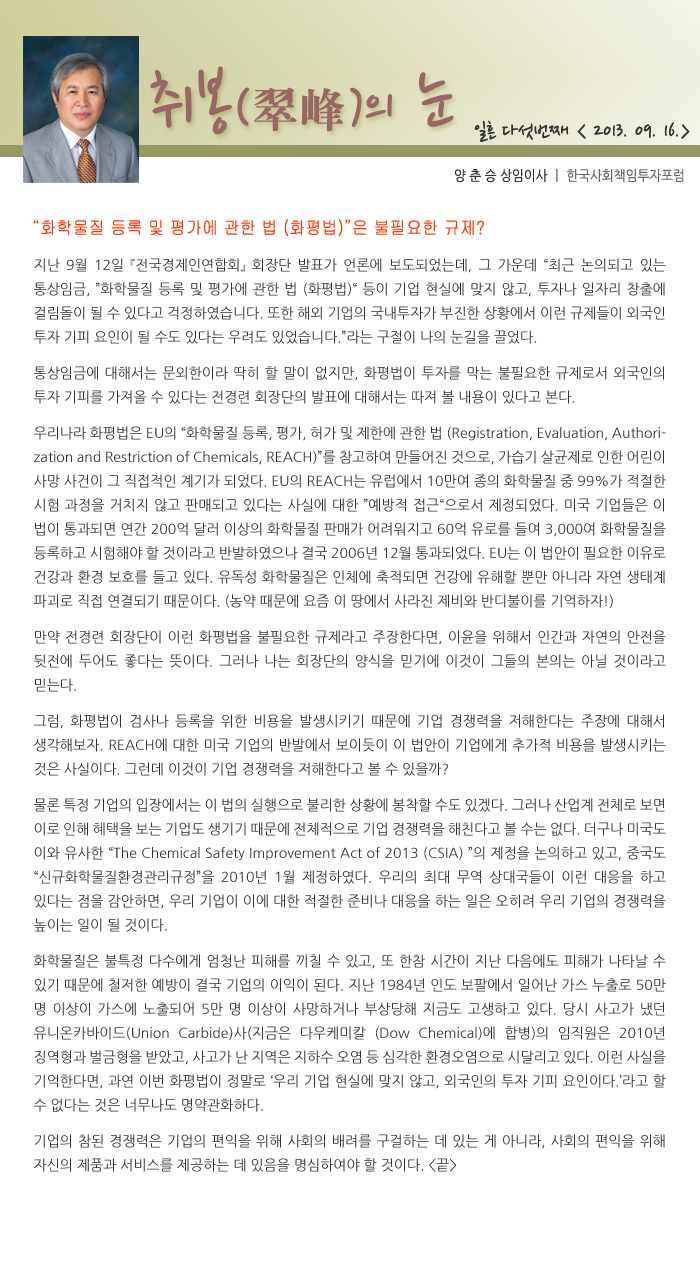
<style>
.page{position:relative;width:700px;height:1276px;background:#ffffff}
.page>*{position:absolute;margin:0}
.t1{font:77.5px "NanumPen";color:#996666}
.t2{font:60px "NanumPen";color:#996666}
.t3{font:48px "H2mjrE";color:#996666}
.t4{font:24px "NanumPen";color:#333333}
.t5{font:14px "NanumGothic";color:#666666;scale:0.9 1}
.t6{font:14px "NanumGothic";color:#333333;scale:0.9 1}
.t7{font:18px "Gulim";color:#ff3300;scale:0.9 1}
.t8{font:14px/24px "NanumGothic";color:#333333}
.t9{font:14px/12px "NanumGothic";color:#333333}
</style>
<div class="page">
<p class="t1" style="left:150px;top:66px;width:304px;height:69px">취봉<span class="t2">(</span><span class="t3">翠峰</span><span class="t2">)</span><span class="t2">의</span> 눈</p>
<p class="t4" style="left:474px;top:120px;width:216px;height:22px">일흔 다섯번째 &lt; 2013. 09. 16.&gt;</p>
<p class="t5" style="left:455px;top:169px;width:229px;height:14px"><span class="t6">양 춘 승 상임이사 </span>ㅣ 한국사회책임투자포럼</p>
<p class="t7" style="left:33px;top:219px;width:451px;height:17px">“화학물질 등록 및 평가에 관한 법 (화평법)”은 불필요한 규제?</p>
<p class="t8" style="left:34px;top:258px;width:632px;height:914px;text-align:justify">지난 9월 12일 『전국경제인연합회』 회장단 발표가 언론에 보도되었는데, 그 가운데 “최근 논의되고 있는 통상임금, ”화학물질 등록 및 평가에 관한 법 (화평법)“ 등이 기업 현실에 맞지 않고, 투자나 일자리 창출에 걸림돌이 될 수 있다고 걱정하였습니다. 또한 해외 기업의 국내투자가 부진한 상황에서 이런 규제들이 외국인 투자 기피 요인이 될 수도 있다는 우려도 있었습니다.”라는 구절이 나의 눈<span class="t9">길을 끌었다. <br><br>통상임금에 대해서는 문외한이라 딱히 할 말이 없지만, 화평법이 투자를 막는 불</span>필요한 규제로서 외국인의 투자 기피를 가져올 수 있다는 전경련 회장단의 발표에 대해서는 따져 볼 내<span class="t9">용이 있다고 본다.<br><br>우리나라 화평법은 EU의 “화학물질 등록, 평가, 허가 및 제한에 관한 법 (Registration, E</span>valuation, Authorization and Restriction of Chemicals, REACH)”를 참고하여 만들어진 것으로, 가습기 살균제로 인한 어린이 사망 사건이 그 직접적인 계기가 되었다. EU의 REACH는 유럽에서 10만여 종의 화학물질 중 99%가 적절한 시험 과정을 거치지 않고 판매되고 있다는 사실에 대한 ”예방적 접근“으로서 제정되었다. 미국 기업들은 이 법이 통과되면 연간 200억 달러 이상의 화학물질 판매가 어려워지고 60억 유로를 들여 3,000여 화학물질을 등록하고 시험해야 할 것이라고 반발하였으나 결국 2006년 12월 통과되었다. EU는 이 법안이 필요한 이유로 건강과 환경 보호를 들고 있다. 유독성 화학물질은 인체에 축적되면 건강에 유해할 뿐만 아니라 자연 생태계 파괴로 직접 연결되기 때문이다. (농약<span class="t9"> 때문에 요즘 이 땅에서 사라진 제비와 반디불이를 기억하자!)<br><br>만약 전경련 회장단이 이런 화평법을 불필요한</span> 규제라고 주장한다면, 이윤을 위해서 인간과 자연의 안전을 뒷전에 두어도 좋다는 뜻이다. 그러나 나는 회장단의 양식을 믿기에 이것이 그들의 본의는 아닐 것이라고 믿<span class="t9">는다.<br><br>그럼, 화평법</span>이 검사나 등록을 위한 비용을 발생시키기 때문에 기업 경쟁력을 저해한다는 주장에 대해서 생각해보자. REACH에 대한 미국 기업의 반발에서 보이듯이 이 법안이 기업에게 추가적 비용을 발생시키는 것은 사실이다. 그런데 이것<span class="t9">이 기업 경쟁력을 저해한다고 볼 수 있을까?<br><br>물론 특정 기업의 입장에서는 이 법의 </span>실행으로 불리한 상황에 봉착할 수도 있겠다. 그러나 산업계 전체로 보면 이로 인해 혜택을 보는 기업도 생기기 때문에 전체적으로 기업 경쟁력을 해친다고 볼 수는 없다. 더구나 미국도 이와 유사한 “The Chemical Safety Improvement Act of 2013 (CSIA) ”의 제정을 논의하고 있고, 중국도 “신규화학물질환경관리규정”을 2010년 1월 제정하였다. 우리의 최대 무역 상대국들이 이런 대응을 하고 있다는 점을 감안하면, 우리 기업이 이에 대한 적절한 준비나 대응을 하는 일은 오히려 우리 기업의 경쟁력을 높이는 일이 <span class="t9">될 것이다. <br><br>화학물질은 불특정 </span>다수에게 엄청난 피해를 끼칠 수 있고, 또 한참 시간이 지난 다음에도 피해가 나타날 수 있기 때문에 철저한 예방이 결국 기업의 이익이 된다. 지난 1984년 인도 보팔에서 일어난 가스 누출로 50만 명 이상이 가스에 노출되어 5만 명 이상이 사망하거나 부상당해 지금도 고생하고 있다. 당시 사고가 냈던 유니온카바이드(Union Carbide)사(지금은 다우케미칼 (Dow Chemical)에 합병)의 임직원은 2010년 징역형과 벌금형을 받았고, 사고가 난 지역은 지하수 오염 등 심각한 환경오염으로 시달리고 있다. 이런 사실을 기억한다면, 과연 이번 화평법이 정말로 ‘우리 기업 현실에 맞지 않고, 외국인의 투자 기피 요인이다.’라고 할 수 없다는 것은 너무나도<span class="t9"> 명약관화하다.<br><br>기업의 참된 경쟁력은 기업의 편익</span>을 위해 사회의 배려를 구걸하는 데 있는 게 아니라, 사회의 편익을 위해 자신의 제품과 서비스를 제공하는 데 있음을 명심하여야 할 것이다. &lt;끝&gt;</p>
</div>
